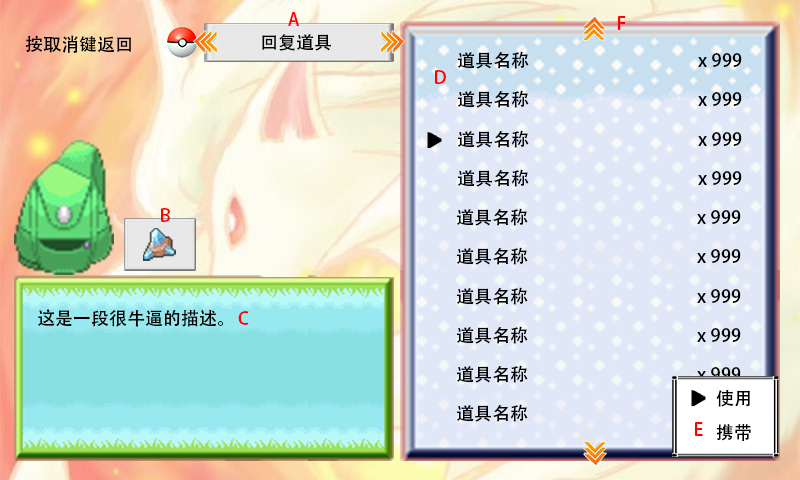
<style>
.page{position:relative;width:800px;height:480px}
.page>*{position:absolute;margin:0}
.t1{font:18px "AdobeHeitiStd-Regular";color:#ff0000}
.t2{font:18px "AdobeHeitiStd-Regular";color:#000000}
.t3{font:18px "AdobeHeitiStd-Regular"}
</style>
<div class="page">
<p class="t1" style="left:288px;top:12px;width:12px;height:14px">A</p>
<p class="t1" style="left:618px;top:16px;width:8px;height:14px">F</p>
<p class="t2" style="left:25px;top:35px;width:106px;height:18px">按取消键返回</p>
<p class="t2" style="left:262px;top:34px;width:69px;height:17px">回复道具</p>
<p class="t2" style="left:458px;top:51px;width:284px;height:18px">道具名称                                          x 999</p>
<p class="t1" style="left:435px;top:70px;width:11px;height:14px">D</p>
<p class="t2" style="left:458px;top:90px;width:284px;height:18px">道具名称                                          x 999</p>
<p class="t2" style="left:458px;top:130px;width:284px;height:18px">道具名称                                          x 999</p>
<p class="t2" style="left:458px;top:169px;width:284px;height:18px">道具名称                                          x 999</p>
<p class="t1" style="left:161px;top:208px;width:9px;height:14px">B</p>
<p class="t2" style="left:457px;top:208px;width:284px;height:18px">道具名称                                          x 999</p>
<p class="t2" style="left:457px;top:247px;width:284px;height:18px">道具名称                                          x 999</p>
<p class="t2" style="left:457px;top:287px;width:284px;height:18px">道具名称                                          x 999</p>
<p class="t2" style="left:38px;top:309px;width:185px;height:18px">这是一段很牛逼的描述。</p>
<p class="t1" style="left:238px;top:311px;width:11px;height:14px">C</p>
<p class="t2" style="left:457px;top:326px;width:284px;height:18px">道具名称                                          x 999</p>
<p class="t2" style="left:457px;top:365px;width:284px;height:18px">道具名称                                          x 999</p>
<p class="t2" style="left:716px;top:390px;width:34px;height:17px">使用</p>
<p class="t3" style="left:457px;top:404px;width:284px;height:18px">道具名称                                          x 999</p>
<p class="t1" style="left:695px;top:422px;width:8px;height:14px">E</p>
<p class="t2" style="left:716px;top:424px;width:35px;height:17px">携带</p>
</div>
